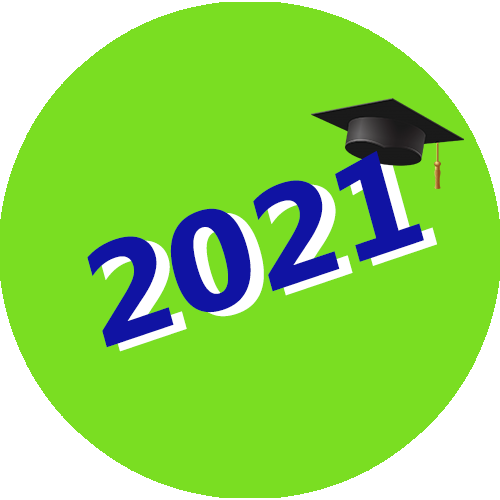
<style>
.page{position:relative;width:500px;height:500px;background:#7ade22}
.page>*{position:absolute;margin:0}
.t1{font:139.8px "MicrosoftNewTaiLue-Bold";color:#1013a3;scale:1.09 1}
.t2{font:139.8px "MicrosoftNewTaiLue-Bold";scale:1.09 1}
</style>
<div class="page">
<p class="t1" style="left:87px;top:151px;width:337px;height:197px;rotate:-19deg">2021</p>
<p class="t2" style="left:100px;top:155px;width:337px;height:197px;rotate:-19deg">2021</p>
</div>
